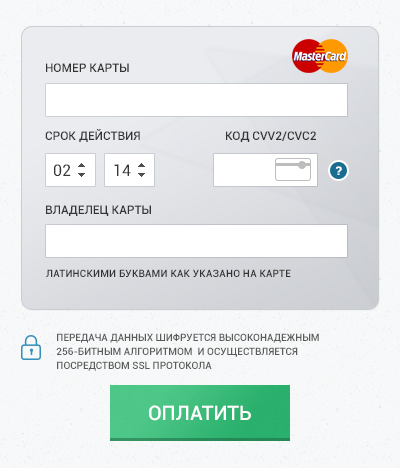
<style>
.page{position:relative;width:400px;height:468px}
.page>*{position:absolute;margin:0}
.t1{font:12px "Roboto-Medium";color:#343434;text-transform:uppercase}
.t2{font:12px "Roboto-Medium";color:#343434}
.t3{font:16px "Roboto-Regular";color:#373737}
.t4{font:12px "Roboto-Black";color:#ffffff}
.t5{font:10px "Roboto-Medium";letter-spacing:0.02em;color:#343434;text-transform:uppercase}
.t6{font:10px/14px "Roboto-Medium";color:#5b5b5b;text-transform:uppercase}
.t7{font:20px "Roboto-Medium";color:#ffffff}
</style>
<div class="page">
<p class="t1" style="left:46px;top:63px;width:83px;height:9px">Номер карты</p>
<p class="t1" style="left:45px;top:129px;width:95px;height:13px">Срок действия</p>
<p class="t2" style="left:226px;top:131px;width:90px;height:11px"><span class="t1">Код </span>CVV2/CVC2</p>
<p class="t3" style="left:54px;top:164px;width:17px;height:12px">02</p>
<p class="t3" style="left:114px;top:164px;width:17px;height:12px">14</p>
<p class="t4" style="left:335px;top:166px;width:7px;height:9px">?</p>
<p class="t1" style="left:46px;top:205px;width:105px;height:11px">Владелец карты</p>
<p class="t5" style="left:46px;top:269px;width:245px;height:8px">Латинскими буквами как указано на карте</p>
<p class="t6" style="left:56px;top:333px;width:263px;height:38px">Передача данных шифруется высоконадежным 256-битным алгоритмом  и осуществляется <br>посредством SSL протокола</p>
<p class="t7" style="left:149px;top:405px;width:102px;height:16px">ОПЛАТИТЬ</p>
</div>
